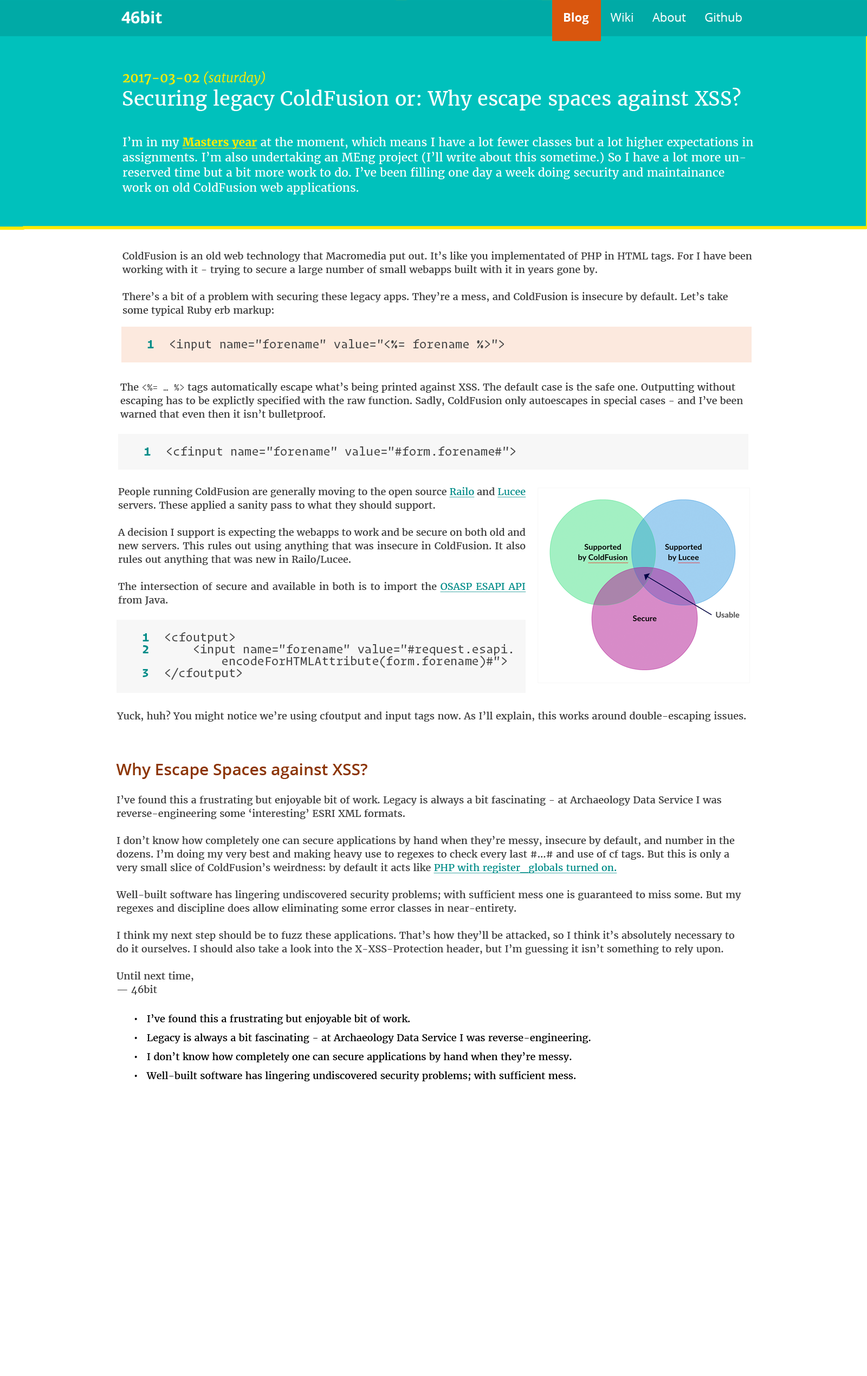
<style>
.page{position:relative;width:867px;height:1376px;background:#ffffff}
.page>*{position:absolute;margin:0}
.t1{font:16.3px "OpenSans-Bold";color:#ffffff}
.t2{font:11.9px "OpenSans";color:#ffffff}
.t3{font:11.9px "OpenSans-Bold";color:#ffffff}
.t4{font:13px "Merriweather-Regular";color:#ffea00}
.t5{font:13px "Merriweather-LightItalic";color:#ffea00}
.t6{font:19.5px "Merriweather-Regular";color:#ffffff}
.t7{font:13px "OperatorMono-Bold";color:#008c88}
.t8{font:13px "OperatorMono-Book";color:#474747}
.t9{font:9.8px/13.5px "Merriweather-Regular";color:#3b3b3b}
.t10{font:9.8px/13.5px "OperatorMono-XLight";color:#3b3b3b}
.t11{font:9.8px/13.5px "Merriweather-Regular";color:#008c88;text-decoration:underline}
.t12{font:13px/11.9px "OperatorMono-Bold";color:#008c88}
.t13{font:13px/11.9px "OperatorMono-Book";color:#474747}
.t14{font:9.8px "Merriweather-Regular";color:#3b3b3b}
.t15{font:16.3px "OpenSans-Semibold";color:#8c3505}
.t16{font:9.8px/19px "Merriweather-Regular";color:#000000}
</style>
<div class="page">
<p class="t1" style="left:121px;top:11px;width:41px;height:13px">46bit</p>
<p class="t2" style="left:564px;top:12px;width:178px;height:12px"><span class="t3">Blog</span>       Wiki      About      Github</p>
<p class="t4" style="left:123px;top:71px;width:142px;height:15px">2017-03-02<span class="t5"> (saturday)</span></p>
<p class="t6" style="left:123px;top:88px;width:617px;height:23px">Securing legacy ColdFusion or: Why escape spaces against XSS?</p>
<p class="t7" style="left:147px;top:340px;width:7px;height:8px">1</p>
<p class="t8" style="left:170px;top:339px;width:334px;height:11px">&lt;input name="forename" value="&lt;%= forename %&gt;"&gt;</p>
<p class="t9" style="left:120px;top:382px;width:623px;height:38px">The <span class="t10">&lt;%= … %&gt;</span> tags automatically escape what’s being printed against XSS. The default case is the safe one. Outputting without escaping has to be explictly specified with the raw function. Sadly, ColdFusion only autoescapes in special cases - and I’ve been warned that even then it isn’t bulletproof.</p>
<p class="t7" style="left:144px;top:447px;width:7px;height:9px">1</p>
<p class="t8" style="left:167px;top:446px;width:348px;height:12px">&lt;cfinput name="forename" value="#form.forename#"&gt;</p>
<p class="t9" style="left:118px;top:487px;width:408px;height:118px;text-align:justify">People running ColdFusion are generally moving to the open source <span class="t11">Railo </span>and <span class="t11">Lucee</span> servers. These applied a sanity pass to what they should support.<br><br>A decision I support is expecting the webapps to work and be secure on both old and new servers. This rules out using anything that was insecure in ColdFusion. It also rules out anything that was new in Railo/Lucee.<br><br>The intersection of secure and available in both is to import the <span class="t11">OSASP ESAPI API</span> from Java.</p>
<p class="t12" style="left:142px;top:633px;width:7px;height:44px;text-align:right">1<br>2<br><br>3</p>
<p class="t13" style="left:165px;top:632px;width:347px;height:48px">&lt;cfoutput&gt;<br>    &lt;input name="forename" value="#request.esapi.<br>        encodeForHTMLAttribute(form.forename)#"&gt;<br>&lt;/cfoutput&gt;</p>
<p class="t14" style="left:116px;top:711px;width:630px;height:11px">Yuck, huh? You might notice we’re using cfoutput and input tags now. As I’ll explain, this works around double-escaping issues.</p>
<p class="t15" style="left:116px;top:763px;width:251px;height:16px">Why Escape Spaces against XSS?</p>
<p class="t9" style="left:116px;top:795px;width:625px;height:200px">I’ve found this a frustrating but enjoyable bit of work. Legacy is always a bit fascinating - at Archaeology Data Service I was reverse-engineering some ‘interesting’ ESRI XML formats.<br><br>I don’t know how completely one can secure applications by hand when they’re messy, insecure by default, and number in the dozens. I’m doing my very best and making heavy use to regexes to check every last #…# and use of cf tags. But this is only a very small slice of ColdFusion’s weirdness: by default it acts like <span class="t11">PHP with register_globals turned on.<br></span><br>Well-built software has lingering undiscovered security problems; with sufficient mess one is guaranteed to miss some. But my regexes and discipline does allow eliminating some error classes in near-entirety.<br><br>I think my next step should be to fuzz these applications. That’s how they’ll be attacked, so I think it’s absolutely necessary to do it ourselves. I should also take a look into the X-XSS-Protection header, but I’m guessing it isn’t something to rely upon.<br><br>Until next time,<br>— 46bit</p>
<p class="t16" style="left:134px;top:1014px;width:456px;height:67px">•   I’ve found this a frustrating but enjoyable bit of work. <br>•   Legacy is always a bit fascinating - at Archaeology Data Service I was reverse-engineering.<br>•   I don’t know how completely one can secure applications by hand when they’re messy.<br>•   Well-built software has lingering undiscovered security problems; with sufficient mess.</p>
</div>
